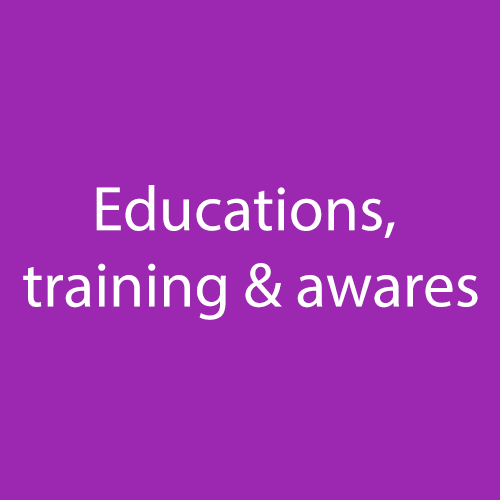
<style>
.page{position:relative;width:500px;height:500px;background:#9c27b0}
.page>*{position:absolute;margin:0}
.t1{font:63.6px "MyriadPro-Regular";color:#ffffff}
</style>
<div class="page">
<p class="t1" style="left:23px;top:185px;width:455px;height:135px;text-align:center">Educations, <br>training &amp; awares</p>
</div>
